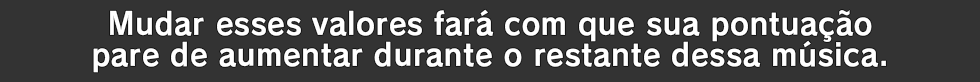
<style>
.page{position:relative;width:980px;height:82px;background:#333333}
.page>*{position:absolute;margin:0}
.t1{font:30.7px "RodinPro-B";letter-spacing:0.016em;color:#ffffff;scale:0.95 1}
</style>
<div class="page">
<p class="t1" style="left:110px;top:9px;width:762px;height:33px">Mudar esses valores fará com que sua pontuação</p>
<p class="t1" style="left:93px;top:40px;width:793px;height:33px">pare de aumentar durante o restante dessa música.</p>
</div>
